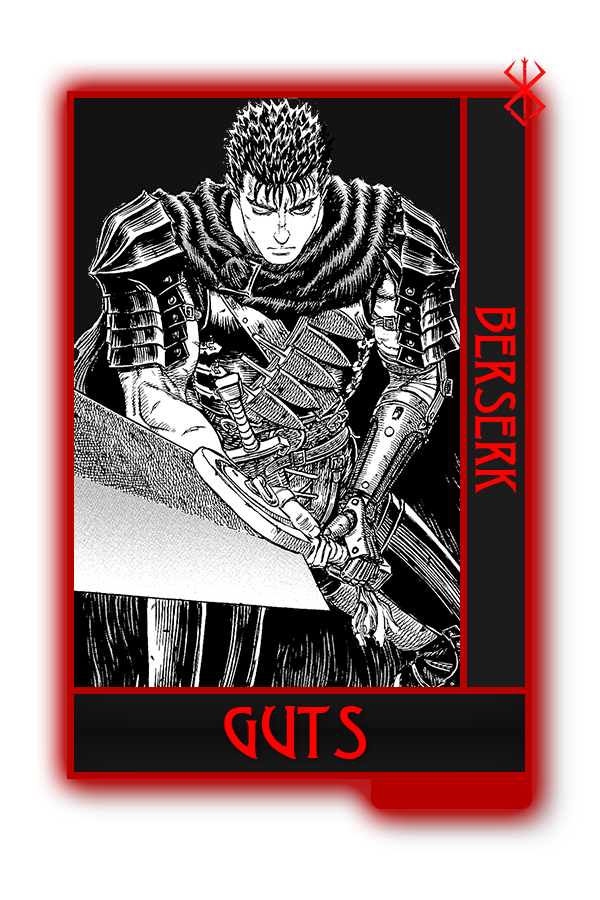
<style>
.page{position:relative;width:600px;height:900px;background:#ffffff}
.page>*{position:absolute;margin:0}
.t1{font:58.3px "QuaintGothicSGOT-Regular";color:#ff0000}
.t2{font:75px "QuaintGothicSGOT-Regular";color:#ff0000}
</style>
<div class="page">
<p class="t1" style="left:474px;top:307px;width:42px;height:187px;rotate:90deg">BERSERK</p>
<p class="t2" style="left:224px;top:706px;width:143px;height:53px">GUTS</p>
</div>
